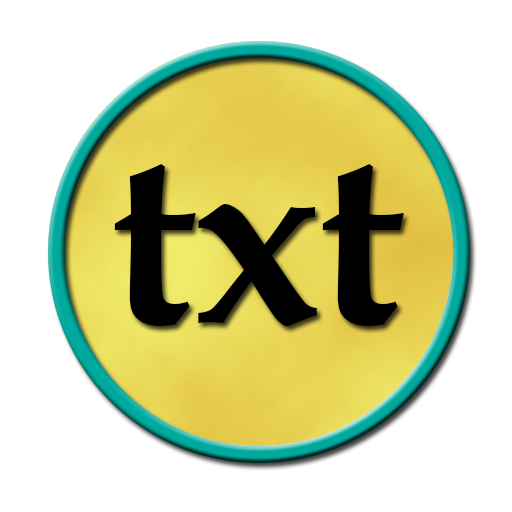
<style>
.page{position:relative;width:512px;height:512px;background:#ffffff}
.page>*{position:absolute;margin:0}
.t1{font:250px "BookAntiqua-Bold";color:#000000}
</style>
<div class="page">
<p class="t1" style="left:114px;top:164px;width:290px;height:162px">txt</p>
</div>
